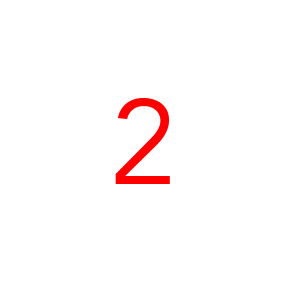
<style>
.page{position:relative;width:283px;height:283px;background:#ffffff}
.page>*{position:absolute;margin:0}
.t1{font:120px "Avenir-Book";color:#ff0000}
</style>
<div class="page">
<p class="t1" style="left:115px;top:98px;width:55px;height:86px">2</p>
</div>
